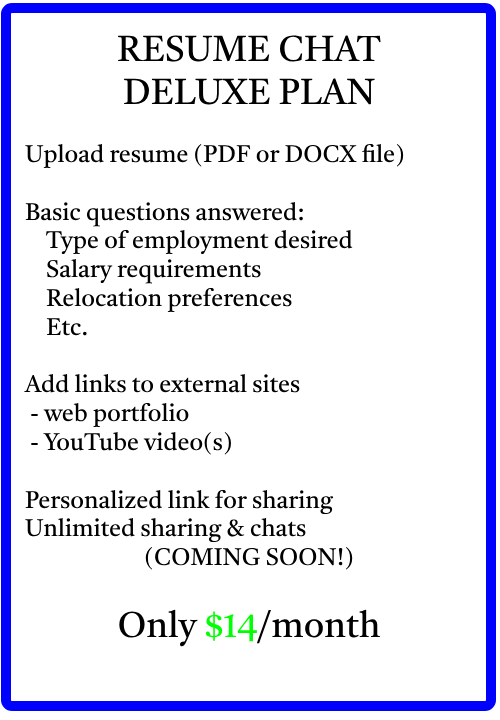
<style>
.page{position:relative;width:500px;height:720px;background:#ffffff}
.page>*{position:absolute;margin:0}
.t1{font:24px "Castoro-Regular";color:#000000}
.t2{font:36px "Castoro-Regular";color:#000000}
.t3{font:36px "Castoro-Regular";color:#00ff00}
</style>
<div class="page">
<p class="t1" style="left:24px;top:35px;width:380px;height:612px;text-align:center"><span class="t2">RESUME CHAT<br>DELUXE PLAN<br><br></span>Upload resume (PDF or DOCX file)<br><br>Basic questions answered:<br>    Type of employment desired<br>    Salary requirements<br>    Relocation preferences<br>    Etc.<br><br>Add links to external sites<br> - web portfolio<br> - YouTube video(s)<br><br>Personalized link for sharing<br>Unlimited sharing &amp; chats<br>(COMING SOON!)<br><br><span class="t2">Only </span><span class="t3">$14</span><span class="t2">/month</span></p>
</div>
